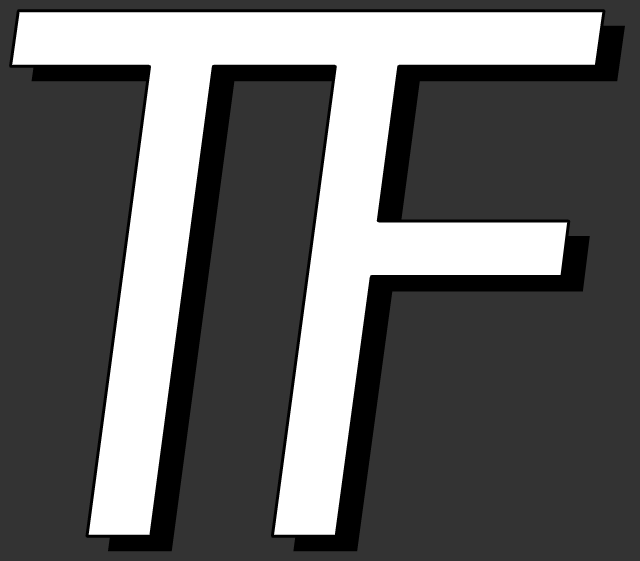
<style>
.page{position:relative;width:640px;height:561px;background:#333333}
.page>*{position:absolute;margin:0}
.t1{font:787.5px "FuturaPT-BookObl";letter-spacing:-0.12em;color:#ffffff;scale:1.09 1}
</style>
<div class="page">
<p class="t1" style="left:10px;top:10px;width:594px;height:527px">TF</p>
</div>
